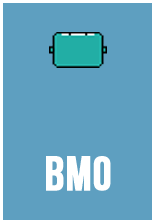
<style>
.page{position:relative;width:155px;height:223px;background:#5e9fc0}
.page>*{position:absolute;margin:0}
.t1{font:48px "BebasNeue";color:#ffffff;font-weight:bold}
</style>
<div class="page">
<p class="t1" style="left:46px;top:156px;width:65px;height:35px">BMO</p>
</div>
